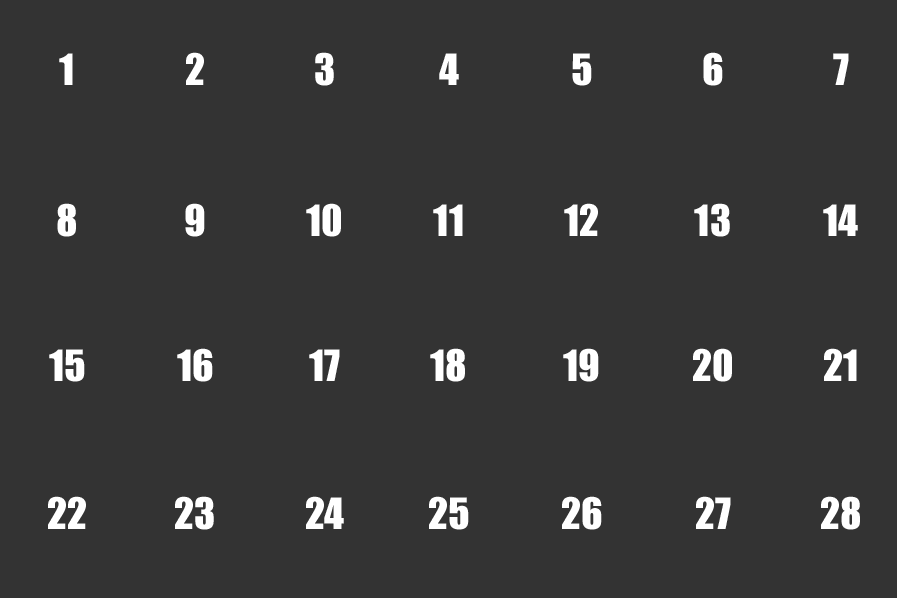
<style>
.page{position:relative;width:897px;height:598px;background:#333333}
.page>*{position:absolute;margin:0}
.t1{font:40px "Impact";color:#ffffff}
</style>
<div class="page">
<p class="t1" style="left:59px;top:53px;width:14px;height:32px">1</p>
<p class="t1" style="left:186px;top:52px;width:18px;height:33px">2</p>
<p class="t1" style="left:315px;top:52px;width:19px;height:34px">3</p>
<p class="t1" style="left:439px;top:53px;width:20px;height:32px">4</p>
<p class="t1" style="left:572px;top:53px;width:20px;height:33px">5</p>
<p class="t1" style="left:703px;top:52px;width:20px;height:34px">6</p>
<p class="t1" style="left:833px;top:53px;width:16px;height:32px">7</p>
<p class="t1" style="left:57px;top:203px;width:19px;height:34px">8</p>
<p class="t1" style="left:185px;top:203px;width:20px;height:34px">9</p>
<p class="t1" style="left:306px;top:203px;width:35px;height:34px">10</p>
<p class="t1" style="left:433px;top:204px;width:30px;height:32px">11</p>
<p class="t1" style="left:564px;top:203px;width:34px;height:33px">12</p>
<p class="t1" style="left:694px;top:203px;width:36px;height:34px">13</p>
<p class="t1" style="left:823px;top:204px;width:35px;height:32px">14</p>
<p class="t1" style="left:49px;top:349px;width:36px;height:33px">15</p>
<p class="t1" style="left:177px;top:348px;width:36px;height:34px">16</p>
<p class="t1" style="left:309px;top:349px;width:31px;height:32px">17</p>
<p class="t1" style="left:430px;top:348px;width:35px;height:34px">18</p>
<p class="t1" style="left:563px;top:348px;width:36px;height:34px">19</p>
<p class="t1" style="left:693px;top:348px;width:39px;height:34px">20</p>
<p class="t1" style="left:824px;top:348px;width:33px;height:33px">21</p>
<p class="t1" style="left:48px;top:496px;width:38px;height:33px">22</p>
<p class="t1" style="left:175px;top:496px;width:39px;height:34px">23</p>
<p class="t1" style="left:306px;top:496px;width:38px;height:33px">24</p>
<p class="t1" style="left:429px;top:496px;width:40px;height:34px">25</p>
<p class="t1" style="left:562px;top:496px;width:40px;height:34px">26</p>
<p class="t1" style="left:696px;top:496px;width:35px;height:33px">27</p>
<p class="t1" style="left:821px;top:496px;width:39px;height:34px">28</p>
</div>
